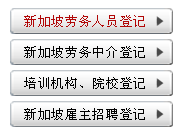
<style>
.page{position:relative;width:184px;height:136px;background:#ffffff}
.page>*{position:absolute;margin:0}
.t1{font:13px "SimSun";letter-spacing:0.05em;color:#b10606}
.t2{font:13px "SimSun";letter-spacing:0.05em;color:#000000}
</style>
<div class="page">
<p class="t1" style="left:24px;top:15px;width:121px;height:12px">新加坡劳务人员登记</p>
<p class="t2" style="left:24px;top:46px;width:121px;height:12px">新加坡劳务中介登记</p>
<p class="t2" style="left:24px;top:77px;width:121px;height:12px">培训机构、院校登记</p>
<p class="t2" style="left:24px;top:108px;width:121px;height:12px">新加坡雇主招聘登记</p>
</div>
